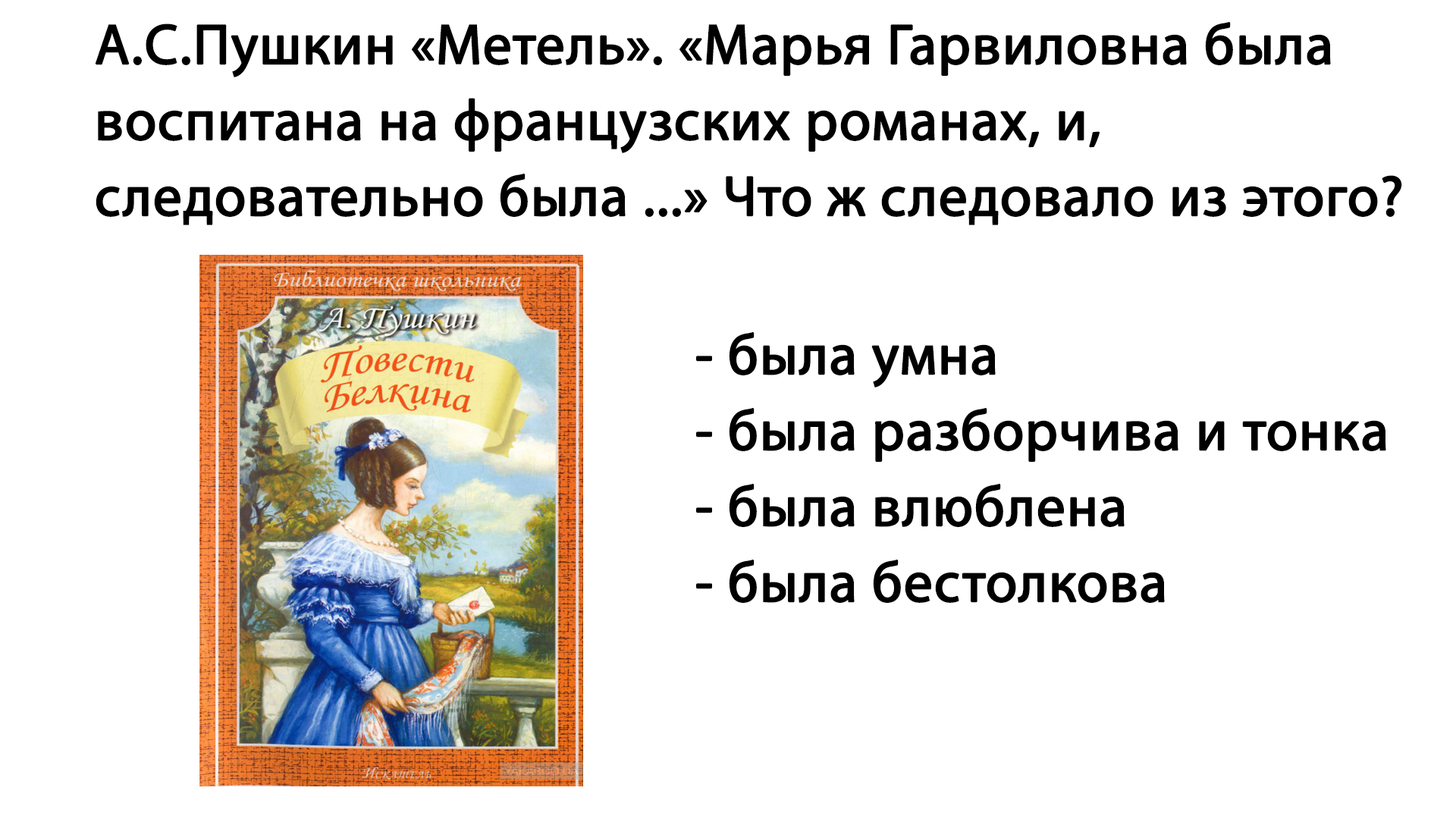
<style>
.page{position:relative;width:1456px;height:819px;background:#ffffff}
.page>*{position:absolute;margin:0}
.t1{font:56.9px/75.8px "MyriadPro-Regular";color:#000000;font-weight:bold}
</style>
<div class="page">
<p class="t1" style="left:95px;top:21px;width:1307px;height:204px">А.С.Пушкин «Метель». «Марья Гарвиловна была<br>воспитана на французских романах, и, <br>следовательно была ...» Что ж следовало из этого?</p>
<p class="t1" style="left:696px;top:331px;width:690px;height:272px">- была умна<br>- была разборчива и тонка<br>- была влюблена<br>- была бестолкова</p>
</div>
